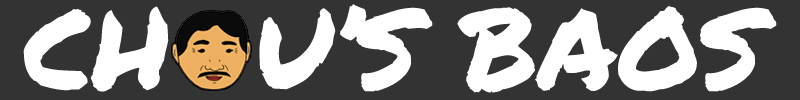
<style>
.page{position:relative;width:800px;height:100px;background:#333333}
.page>*{position:absolute;margin:0}
.t1{font:112.5px "PermanentMarker";color:#ffffff}
</style>
<div class="page">
<p class="t1" style="left:23px;top:4px;width:754px;height:89px">CH  U’S BAOS</p>
</div>
